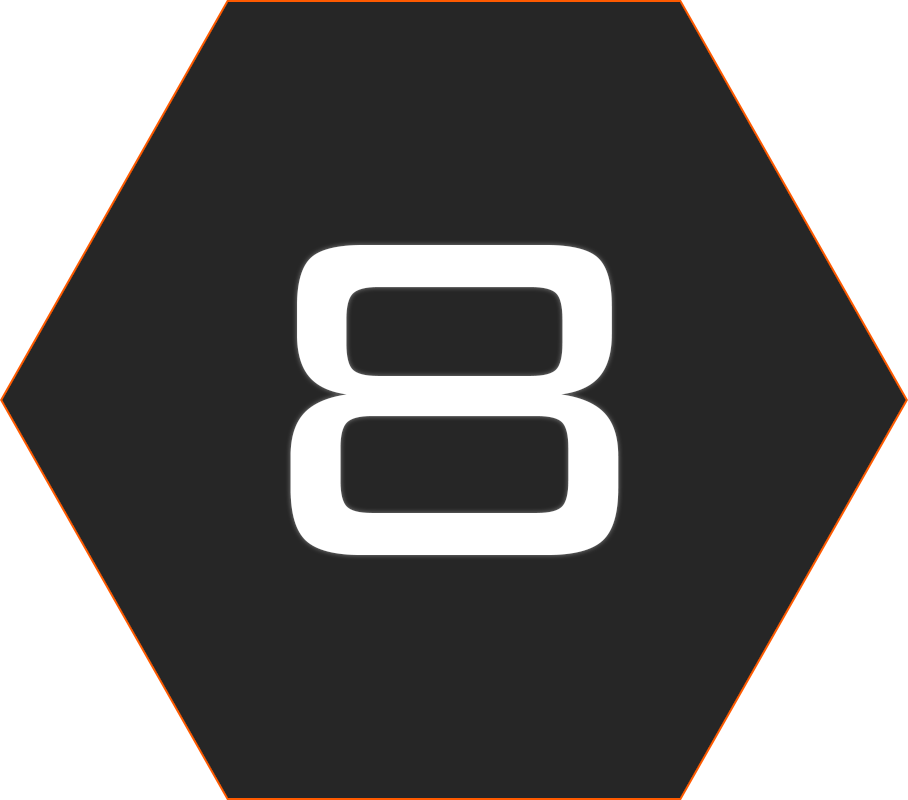
<style>
.page{position:relative;width:908px;height:800px;background:#262626}
.page>*{position:absolute;margin:0}
.t1{font:600px "BankGothicBT-Light";color:#ffffff}
</style>
<div class="page">
<p class="t1" style="left:290px;top:245px;width:329px;height:310px">8</p>
</div>
